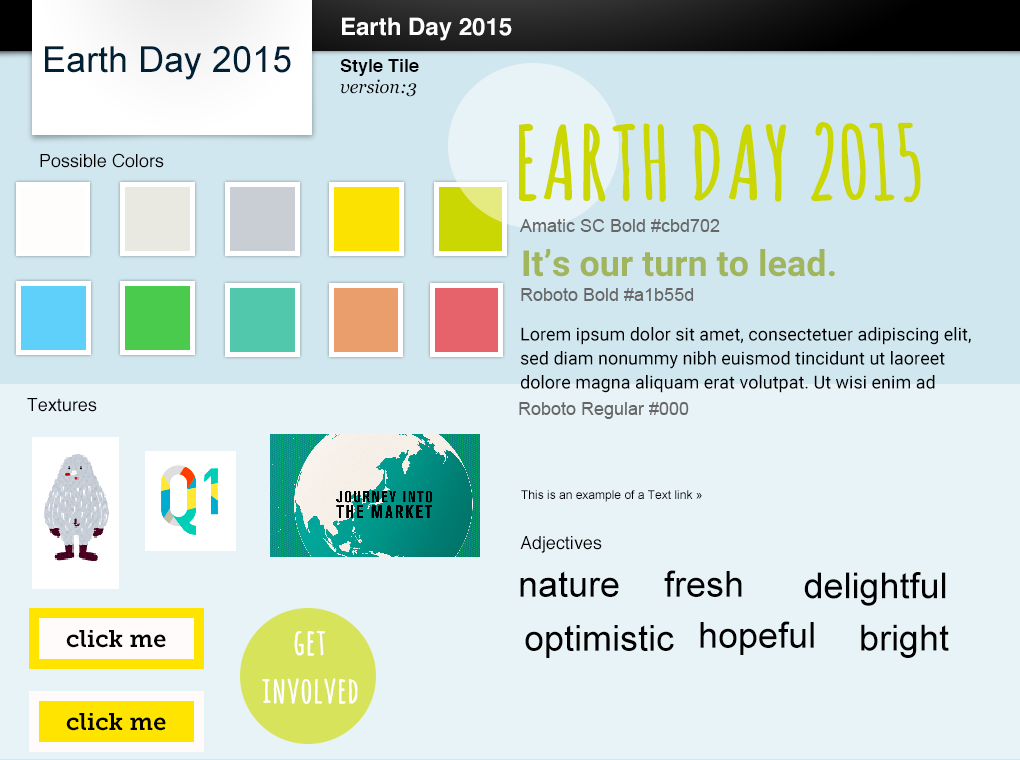
<style>
.page{position:relative;width:1020px;height:760px;background:#e8f3f7}
.page>*{position:absolute;margin:0}
.t1{font:24px "Helvetica-Bold";color:#ffffff}
.t2{font:36px "ArialMT";color:#002035}
.t3{font:18px "Helvetica-Bold";color:#000000}
.t4{font:18px "Georgia-Italic";color:#000000}
.t5{font:100px "AmaticSC-Bold";color:#cbd702;font-weight:bold}
.t6{font:18px "Helvetica";color:#000000}
.t7{font:18px "ArialMT";color:#666666}
.t8{font:36px "Roboto-Bold";color:#a1b55d}
.t9{font:18px/24px "Roboto-Regular";color:#000000}
.t10{font:12px "ArialMT";color:#000000}
.t11{font:36px "ArialMT";color:#000000}
.t12{font:24px "MuseoSlab-700";color:#020202}
.t13{font:36px/48px "AmaticSC-Bold";color:#ffffff;font-weight:bold}
</style>
<div class="page">
<p class="t1" style="left:342px;top:17px;width:170px;height:24px">Earth Day 2015</p>
<p class="t2" style="left:45px;top:46px;width:246px;height:34px">Earth Day 2015</p>
<p class="t3" style="left:340px;top:59px;width:79px;height:17px">Style Tile</p>
<p class="t4" style="left:340px;top:79px;width:77px;height:18px">version:3</p>
<p class="t5" style="left:519px;top:122px;width:402px;height:81px">EARTH DAY 2015</p>
<p class="t6" style="left:40px;top:153px;width:124px;height:15px">Possible Colors</p>
<p class="t7" style="left:519px;top:219px;width:201px;height:13px">Amatic SC Bold #cbd702</p>
<p class="t8" style="left:523px;top:249px;width:312px;height:28px">It’s our turn to lead.</p>
<p class="t7" style="left:521px;top:288px;width:173px;height:13px">Roboto Bold #a1b55d</p>
<p class="t9" style="left:520px;top:327px;width:451px;height:66px">Lorem ipsum dolor sit amet, consectetuer adipiscing elit, sed diam nonummy nibh euismod tincidunt ut laoreet dolore magna aliquam erat volutpat. Ut wisi enim ad</p>
<p class="t6" style="left:27px;top:398px;width:70px;height:14px">Textures</p>
<p class="t7" style="left:519px;top:402px;width:170px;height:17px">Roboto Regular #000</p>
<p class="t10" style="left:521px;top:490px;width:181px;height:12px">This is an example of a Text link »</p>
<p class="t6" style="left:520px;top:536px;width:82px;height:17px">Adjectives</p>
<p class="t11" style="left:520px;top:571px;width:99px;height:26px">nature</p>
<p class="t11" style="left:664px;top:570px;width:78px;height:27px">fresh</p>
<p class="t11" style="left:804px;top:572px;width:142px;height:34px">delightful</p>
<p class="t12" style="left:66px;top:630px;width:100px;height:18px">click me</p>
<p class="t13" style="left:262px;top:630px;width:96px;height:74px">get involved</p>
<p class="t11" style="left:525px;top:625px;width:149px;height:33px">optimistic</p>
<p class="t11" style="left:700px;top:621px;width:114px;height:34px">hopeful</p>
<p class="t11" style="left:861px;top:624px;width:88px;height:34px">bright</p>
<p class="t12" style="left:66px;top:713px;width:100px;height:18px">click me</p>
</div>
